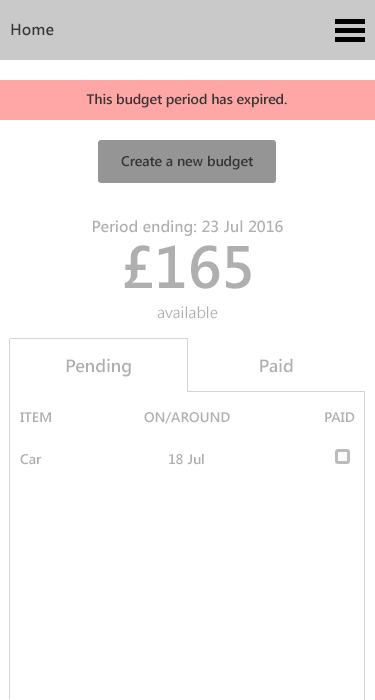
<style>
.page{position:relative;width:375px;height:700px;background:#ffffff}
.page>*{position:absolute;margin:0}
.t1{font:16px "SegoeUI-SemiBold";color:#363636}
.t2{font:14px "SegoeUI-SemiBold";color:#363636}
.t3{font:16px "SegoeUI-SemiBold";color:#afafaf}
.t4{font:60px/56px "SegoeUI-SemiBold";color:#afafaf}
.t5{font:16px/30px "SegoeUI";color:#afafaf}
.t6{font:18px "SegoeUI-SemiBold";color:#afafaf}
.t7{font:14px "SegoeUI-SemiBold";color:#afafaf}
</style>
<div class="page">
<p class="t1" style="left:11px;top:23px;width:43px;height:13px">Home</p>
<p class="t2" style="left:86px;top:93px;width:201px;height:15px">This budget period has expired.</p>
<p class="t2" style="left:121px;top:155px;width:132px;height:15px">Create a new budget</p>
<p class="t3" style="left:93px;top:220px;width:190px;height:99px;text-align:center">Period ending: 23 Jul 2016<br><span class="t4">£165<br></span><span class="t5">available</span></p>
<p class="t6" style="left:66px;top:358px;width:65px;height:19px">Pending</p>
<p class="t6" style="left:260px;top:358px;width:33px;height:15px">Paid</p>
<p class="t7" style="left:20px;top:412px;width:31px;height:10px">ITEM</p>
<p class="t7" style="left:144px;top:412px;width:86px;height:12px">ON/AROUND</p>
<p class="t7" style="left:325px;top:412px;width:30px;height:10px">PAID</p>
<p class="t7" style="left:20px;top:454px;width:22px;height:11px">Car</p>
<p class="t7" style="left:169px;top:453px;width:35px;height:12px">18 Jul</p>
</div>
